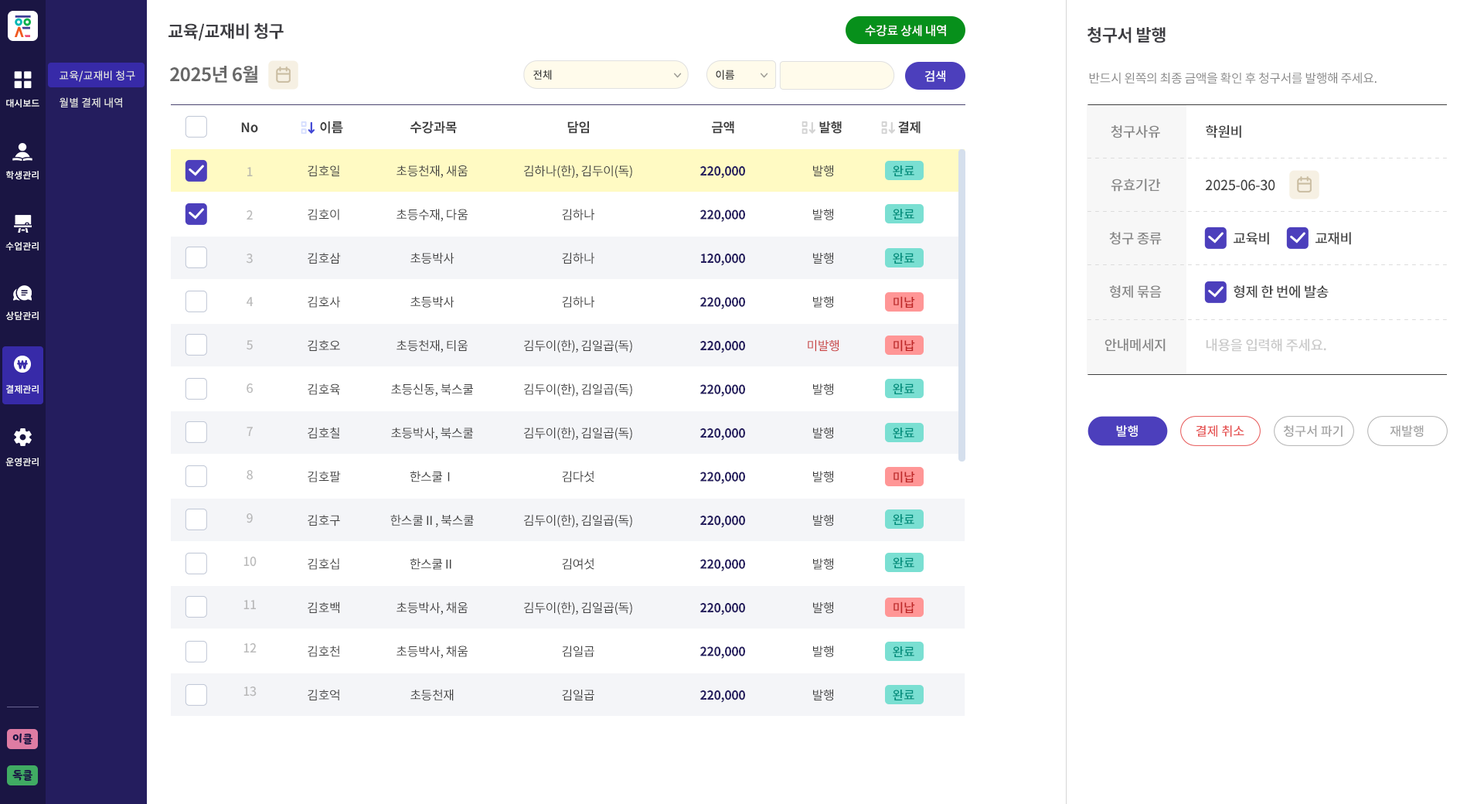
<style>
.page{position:relative;width:1484px;height:804px;background:#ffffff}
.page>*{position:absolute;margin:0}
.t1{font:17px "NotoSansCJKkr-Bold";letter-spacing:-0.025em;color:#3e3e43;text-transform:uppercase}
.t2{font:12.4px "NotoSansCJKkr-Medium";letter-spacing:-0.025em;color:#ffffff}
.t3{font:18.5px "NotoSansCJKkr-Bold";letter-spacing:-0.025em;color:#686868}
.t4{font:10.8px/27px "NotoSansCJKkr-Medium";color:#e1e1e1}
.t5{font:10.8px "NotoSansCJKkr-Medium";letter-spacing:-0.025em;color:#323232}
.t6{font:12.4px "NotoSansCJKkr-Regular";letter-spacing:-0.025em;color:#878787}
.t7{font:9.3px "NotoSansCJKkr-Medium";color:#ffffff}
.t8{font:13.1px "NotoSansCJKkr-Bold";letter-spacing:-0.025em;color:#404040}
.t9{font:13.9px/53.3px "NotoSansCJKkr-Medium";letter-spacing:-0.025em;color:#878787}
.t10{font:13.9px/53.3px "NotoSansCJKkr-Medium";letter-spacing:-0.025em;color:#454545}
.t11{font:13.9px/53.3px "NotoSansCJKkr-Medium";letter-spacing:-0.025em;color:#424242}
.t12{font:13.9px/53.3px "NotoSansCJKkr-Medium";letter-spacing:-0.025em;color:#cacaca}
.t13{font:12.4px/43.3px "NotoSansCJKkr-Medium";letter-spacing:-0.025em;color:#a8a8a8}
.t14{font:12.4px/43.7px "NotoSansCJKkr-Regular";letter-spacing:-0.025em;color:#404040}
.t15{font:12.4px/43.7px "NotoSansCJKkr-Bold";letter-spacing:-0.025em;color:#241d5e}
.t16{font:12.4px/43.7px "NotoSansCJKkr-Regular";letter-spacing:-0.025em;color:#c73939}
.t17{font:12.4px "NotoSansCJKkr-Medium";letter-spacing:-0.025em;color:#008d7b}
.t18{font:12.4px "NotoSansCJKkr-Medium";letter-spacing:-0.025em;color:#be2727}
.t19{font:12.7px "NotoSansCJKkr-Medium";letter-spacing:-0.005em;color:#ffffff}
.t20{font:12.7px "NotoSansCJKkr-Medium";letter-spacing:-0.005em;color:#e65555}
.t21{font:12.7px "NotoSansCJKkr-Medium";letter-spacing:-0.005em;color:#a3a3a3}
.t22{font:10.8px "YoonSoftSlime";color:#1a1543}
</style>
<div class="page">
<p class="t1" style="left:168px;top:23px;width:116px;height:18px">교육/교재비 청구</p>
<p class="t2" style="left:865px;top:25px;width:81px;height:11px">수강료 상세 내역</p>
<p class="t1" style="left:1087px;top:27px;width:78px;height:16px">청구서 발행</p>
<p class="t3" style="left:170px;top:66px;width:88px;height:17px">2025년 6월</p>
<p class="t4" style="left:60px;top:70px;width:75px;height:38px">교육/교재비 청구<br>월별 결제 내역</p>
<p class="t5" style="left:533px;top:70px;width:19px;height:10px">전체</p>
<p class="t5" style="left:716px;top:70px;width:18px;height:10px">이름</p>
<p class="t2" style="left:924px;top:70px;width:21px;height:12px">검색</p>
<p class="t6" style="left:1089px;top:72px;width:287px;height:12px">반드시 왼쪽의 최종 금액을 확인 후 청구서를 발행해 주세요.</p>
<p class="t7" style="left:6px;top:99px;width:33px;height:8px">대시보드</p>
<p class="t8" style="left:241px;top:122px;width:17px;height:11px">No</p>
<p class="t8" style="left:320px;top:121px;width:23px;height:13px">이름</p>
<p class="t8" style="left:410px;top:121px;width:47px;height:13px">수강과목</p>
<p class="t8" style="left:567px;top:121px;width:22px;height:13px">담임</p>
<p class="t8" style="left:712px;top:121px;width:22px;height:13px">금액</p>
<p class="t8" style="left:819px;top:121px;width:23px;height:13px">발행</p>
<p class="t8" style="left:898px;top:121px;width:22px;height:13px">결제</p>
<p class="t9" style="left:1104px;top:125px;width:61px;height:227px;text-align:center">청구사유<br>유효기간<br>청구 종류<br>형제 묶음<br>안내메세지</p>
<p class="t10" style="left:1206px;top:125px;width:145px;height:227px"><span class="t11">학원비<br>2025-06-30<br>          </span>교육비                교재비<br>          형제 한 번에 발송<br><span class="t12">내용을 입력해 주세요.</span></p>
<p class="t7" style="left:6px;top:171px;width:33px;height:8px">학생관리</p>
<p class="t13" style="left:243px;top:167px;width:14px;height:529px;text-align:center;opacity:0.8">1<br>2<br>3<br>4<br>5<br>6<br>7<br>8<br>9<br>10<br>11<br>12<br>13</p>
<p class="t14" style="left:308px;top:165px;width:33px;height:535px">김호일<br>김호이<br>김호삼<br>김호사<br>김호오<br>김호육<br>김호칠<br>김호팔<br>김호구<br>김호십<br>김호백<br>김호천<br>김호억</p>
<p class="t14" style="left:390px;top:165px;width:84px;height:536px;text-align:center">초등천재, 새움<br>초등수재, 다움<br>초등박사<br>초등박사<br>초등천재, 티움<br>초등신동, 북스쿨<br>초등박사, 북스쿨<br>한스쿨Ⅰ<br>한스쿨Ⅱ, 북스쿨<br>한스쿨Ⅱ<br>초등박사, 채움<br>초등박사, 채움<br>초등천재</p>
<p class="t14" style="left:524px;top:165px;width:108px;height:535px;text-align:center">김하나(한), 김두이(독)<br>김하나<br>김하나<br>김하나<br>김두이(한), 김일곱(독)<br>김두이(한), 김일곱(독)<br>김두이(한), 김일곱(독)<br>김다섯<br>김두이(한), 김일곱(독)<br>김여섯<br>김두이(한), 김일곱(독)<br>김일곱<br>김일곱</p>
<p class="t15" style="left:700px;top:166px;width:45px;height:536px;text-align:center">220,000<br>220,000<br>120,000<br>220,000<br>220,000<br>220,000<br>220,000<br>220,000<br>220,000<br>220,000<br>220,000<br>220,000<br>220,000</p>
<p class="t14" style="left:808px;top:165px;width:30px;height:536px;text-align:center">발행<br>발행<br>발행<br>발행<br><span class="t16">미발행<br></span>발행<br>발행<br>발행<br>발행<br>발행<br>발행<br>발행<br>발행</p>
<p class="t17" style="left:893px;top:165px;width:21px;height:11px">완료</p>
<p class="t17" style="left:893px;top:209px;width:21px;height:10px">완료</p>
<p class="t7" style="left:5px;top:242px;width:34px;height:8px">수업관리</p>
<p class="t17" style="left:893px;top:253px;width:21px;height:11px">완료</p>
<p class="t18" style="left:893px;top:296px;width:22px;height:12px">미납</p>
<p class="t7" style="left:5px;top:311px;width:34px;height:9px">상담관리</p>
<p class="t18" style="left:893px;top:339px;width:22px;height:13px">미납</p>
<p class="t7" style="left:6px;top:385px;width:33px;height:8px">결제관리</p>
<p class="t17" style="left:893px;top:383px;width:21px;height:11px">완료</p>
<p class="t19" style="left:1116px;top:425px;width:22px;height:12px">발행</p>
<p class="t20" style="left:1195px;top:425px;width:49px;height:12px">결제 취소</p>
<p class="t21" style="left:1283px;top:425px;width:59px;height:12px">청구서 파기</p>
<p class="t21" style="left:1389px;top:425px;width:34px;height:12px">재발행</p>
<p class="t17" style="left:893px;top:427px;width:21px;height:11px">완료</p>
<p class="t7" style="left:5px;top:457px;width:34px;height:9px">운영관리</p>
<p class="t18" style="left:893px;top:471px;width:22px;height:12px">미납</p>
<p class="t17" style="left:893px;top:514px;width:21px;height:11px">완료</p>
<p class="t17" style="left:893px;top:557px;width:21px;height:11px">완료</p>
<p class="t18" style="left:893px;top:601px;width:22px;height:13px">미납</p>
<p class="t17" style="left:893px;top:646px;width:21px;height:11px">완료</p>
<p class="t17" style="left:893px;top:689px;width:21px;height:11px">완료</p>
<p class="t22" style="left:12px;top:733px;width:20px;height:11px">이클</p>
<p class="t22" style="left:12px;top:770px;width:20px;height:10px">독클</p>
</div>
